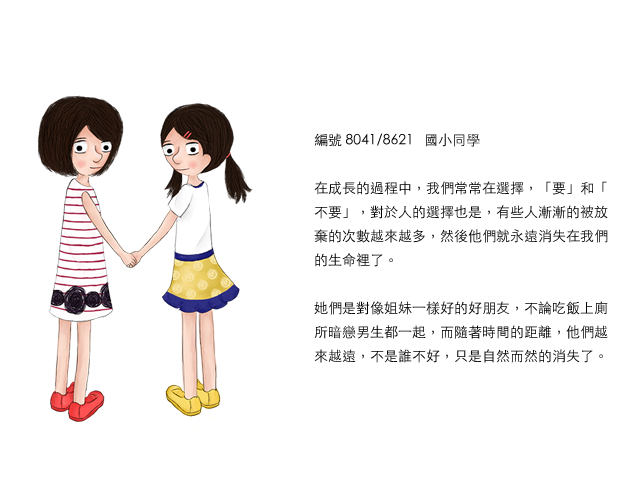
<style>
.page{position:relative;width:640px;height:480px;background:#ffffff}
.page>*{position:absolute;margin:0}
.t1{font:14px/24px "STHeitiTC-Light";color:#000000}
</style>
<div class="page">
<p class="t1" style="left:314px;top:133px;width:294px;height:230px">編號 8041/8621   國小同學<br><br>在成長的過程中，我們常常在選擇，「要」和「不要」，對於人的選擇也是，有些人漸漸的被放棄的次數越來越多，然後他們就永遠消失在我們的生命裡了。<br><br>她們是對像姐妹一樣好的好朋友，不論吃飯上廁所暗戀男生都一起，而隨著時間的距離，他們越來越遠，不是誰不好，只是自然而然的消失了。</p>
</div>
